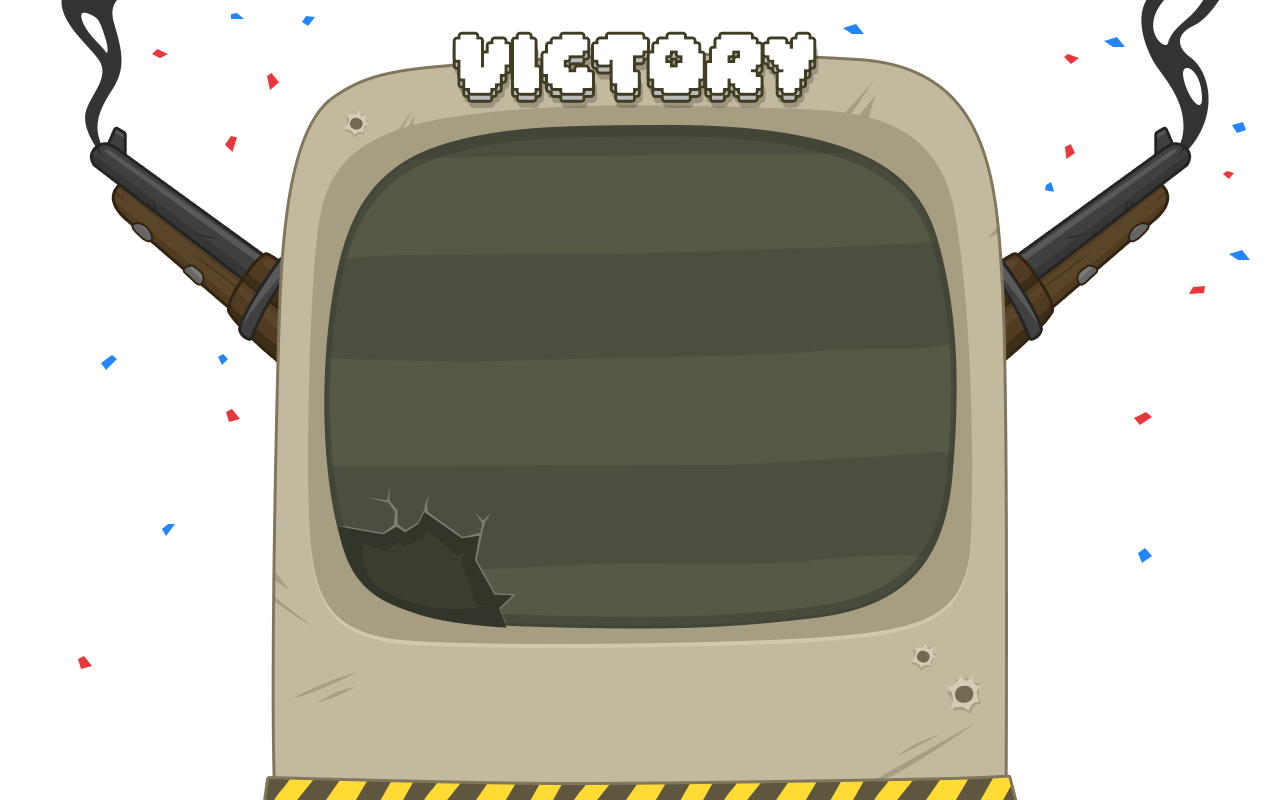
<style>
.page{position:relative;width:1280px;height:800px;background:#ffffff}
.page>*{position:absolute;margin:0}
.t1{font:50px "Daydream";color:#ffffff;text-transform:uppercase;font-weight:bold}
</style>
<div class="page">
<p class="t1" style="left:455px;top:41px;width:359px;height:59px">VICTORY</p>
<p class="t1" style="left:455px;top:34px;width:359px;height:59px">VICTORY</p>
</div>
